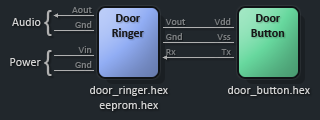
<style>
.page{position:relative;width:320px;height:120px;background:#21272c}
.page>*{position:absolute;margin:0}
.t1{font:30px "Calibri";color:#b0b0b0}
.t2{font:10px/15px "Calibri";color:#7a7d7f}
.t3{font:12px "Calibri-Bold";color:#181818}
.t4{font:12px "Calibri";color:#d2d2d2}
.t5{font:12px/15px "Calibri";color:#d2d2d2}
</style>
<div class="page">
<p class="t1" style="left:44px;top:10px;width:8px;height:26px">{</p>
<p class="t2" style="left:72px;top:7px;width:20px;height:21px;text-align:right">Aout<br>Gnd</p>
<p class="t3" style="left:112px;top:14px;width:32px;height:25px;text-align:center">Door<br>Ringer</p>
<p class="t3" style="left:251px;top:14px;width:34px;height:23px;text-align:center">Door<br>Button</p>
<p class="t4" style="left:12px;top:18px;width:29px;height:8px">Audio</p>
<p class="t2" style="left:165px;top:19px;width:21px;height:36px">Vout<br>Gnd<br>Rx</p>
<p class="t2" style="left:214px;top:18px;width:17px;height:37px;text-align:right">Vdd<br>Vss<br>Tx</p>
<p class="t1" style="left:44px;top:50px;width:8px;height:26px">{</p>
<p class="t2" style="left:75px;top:46px;width:17px;height:22px;text-align:right">Vin<br>Gnd</p>
<p class="t4" style="left:10px;top:58px;width:31px;height:8px">Power</p>
<p class="t5" style="left:90px;top:86px;width:78px;height:25px;text-align:center">door_ringer.hex<br>eeprom.hex</p>
<p class="t4" style="left:228px;top:86px;width:82px;height:10px">door_button.hex</p>
</div>
